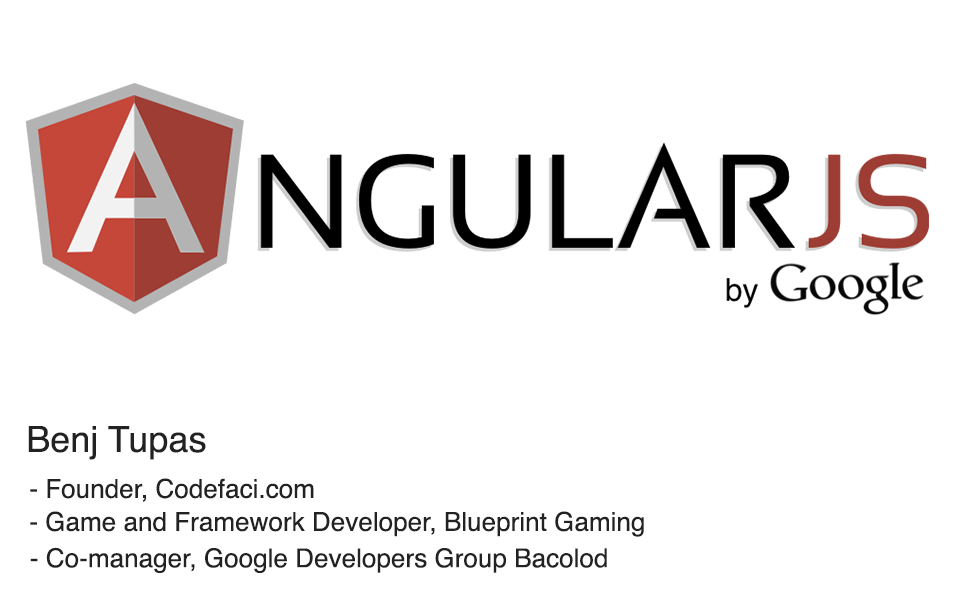
<style>
.page{position:relative;width:960px;height:600px;background:#ffffff}
.page>*{position:absolute;margin:0}
.t1{font:36px "Helvetica";color:#222222}
.t2{font:26.1px "Helvetica";color:#222222}
</style>
<div class="page">
<p class="t1" style="left:28px;top:426px;width:178px;height:34px">Benj Tupas</p>
<p class="t2" style="left:30px;top:478px;width:284px;height:24px">- Founder, Codefaci.com</p>
<p class="t2" style="left:30px;top:511px;width:614px;height:26px">- Game and Framework Developer, Blueprint Gaming</p>
<p class="t2" style="left:30px;top:547px;width:577px;height:26px">- Co-manager, Google Developers Group Bacolod</p>
</div>
